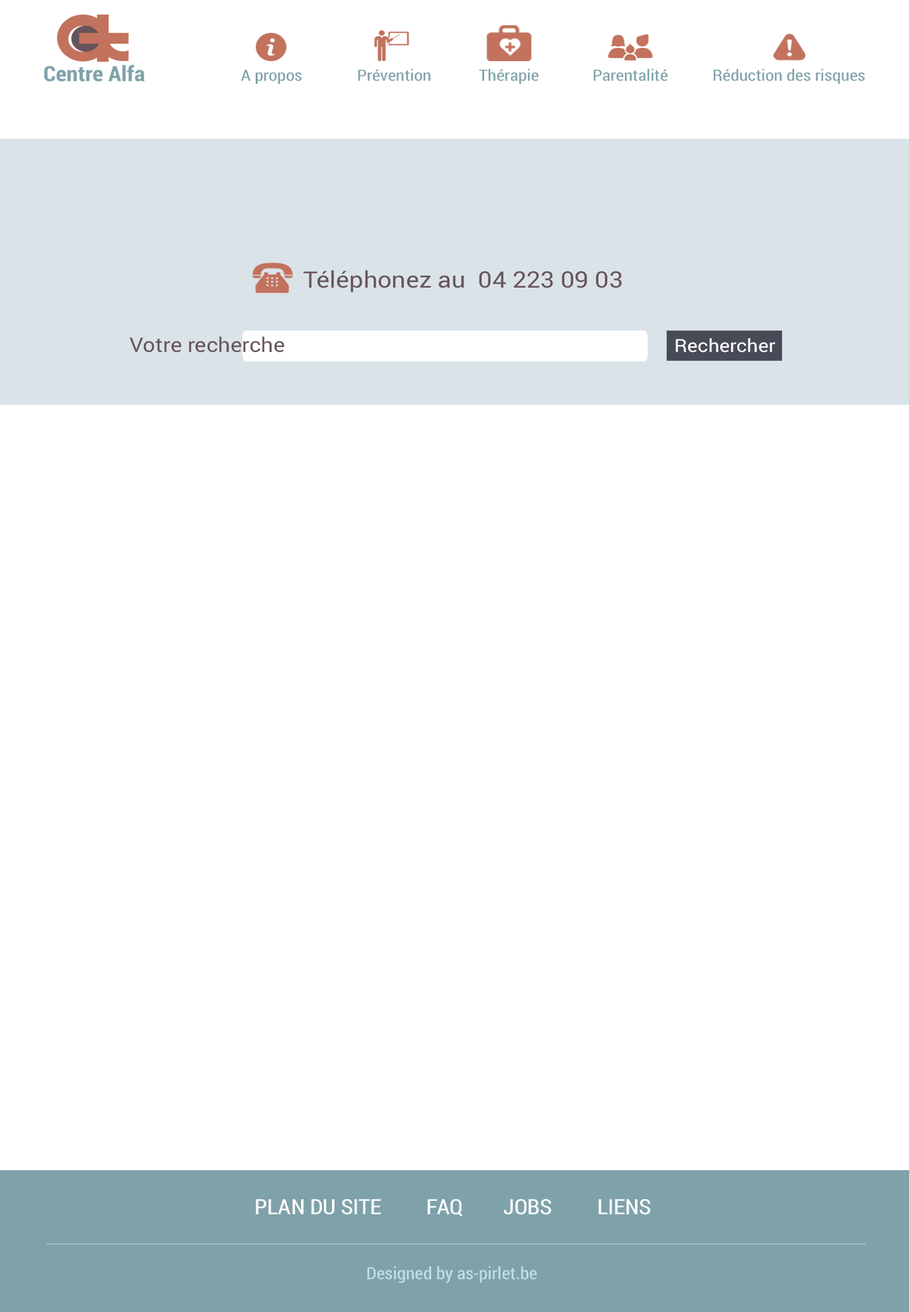
<style>
.page{position:relative;width:909px;height:1312px;background:#ffffff}
.page>*{position:absolute;margin:0}
.t1{font:15.7px "RobotoCondensed-Regular";color:#7fa2aa;scale:1.14 1}
.t2{font:22.7px "Roboto-Regular";color:#67545a;scale:1.1 1}
.t3{font:20.2px "Roboto-Regular";color:#67545a;scale:1.09 1}
.t4{font:17.9px "Roboto-Regular";color:#ffffff;scale:1.1 1}
.t5{font:21px "RobotoCondensed-Regular";color:#ffffff;text-transform:uppercase;scale:1.09 1}
.t6{font:16.8px "RobotoCondensed-Regular";color:#bfe0e8;scale:1.09 1}
</style>
<div class="page">
<p class="t1" style="left:240px;top:69px;width:62px;height:15px">A propos</p>
<p class="t1" style="left:358px;top:69px;width:72px;height:12px">Prévention</p>
<p class="t1" style="left:479px;top:69px;width:59px;height:15px">Thérapie</p>
<p class="t1" style="left:593px;top:69px;width:75px;height:12px">Parentalité</p>
<p class="t1" style="left:713px;top:69px;width:151px;height:15px">Réduction des risques</p>
<p class="t2" style="left:303px;top:270px;width:318px;height:23px">Téléphonez au  04 223 09 03</p>
<p class="t3" style="left:129px;top:336px;width:155px;height:17px">Votre recherche</p>
<p class="t4" style="left:675px;top:338px;width:100px;height:15px">Rechercher</p>
<p class="t5" style="left:256px;top:1199px;width:394px;height:18px">Plan du site         Faq        Jobs         Liens</p>
<p class="t6" style="left:367px;top:1266px;width:170px;height:17px">Designed by as-pirlet.be</p>
</div>
